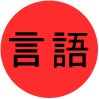
<style>
.page{position:relative;width:99px;height:99px;background:#fe2c2c}
.page>*{position:absolute;margin:0}
.t1{font:40px "MS-Gothic";letter-spacing:0.1em;color:#010101}
</style>
<div class="page">
<p class="t1" style="left:9px;top:32px;width:80px;height:36px">言語</p>
</div>
